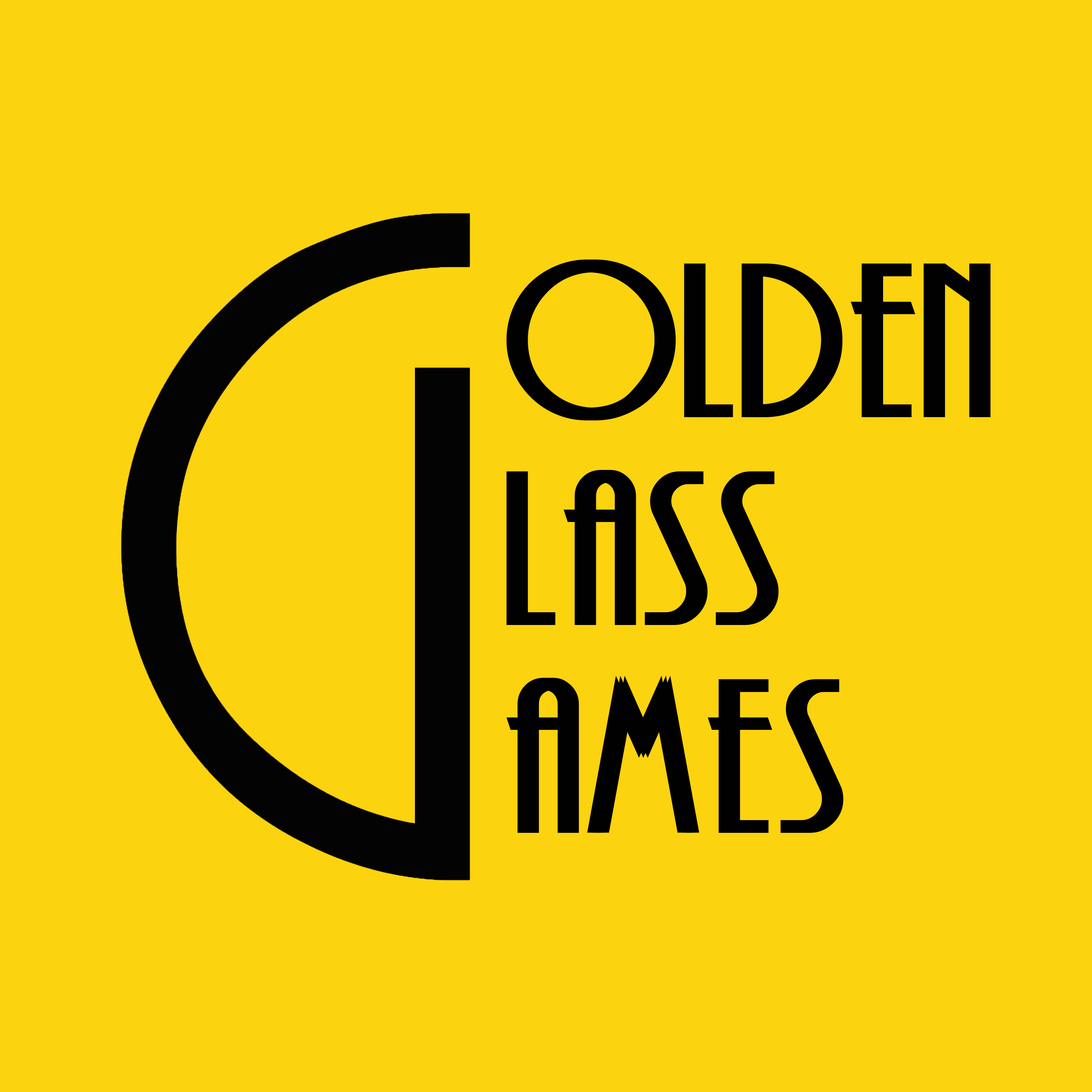
<style>
.page{position:relative;width:1092px;height:1092px;background:#fcd30f}
.page>*{position:absolute;margin:0}
.t1{font:204.7px/207.8px "Andes";letter-spacing:0.04em;color:#010101}
</style>
<div class="page">
<p class="t1" style="left:506px;top:260px;width:476px;height:573px">olden<br>lass<br>ames</p>
<p class="t1" style="left:511px;top:260px;width:475px;height:573px">olden<br>lass<br>ames</p>
<p class="t1" style="left:515px;top:260px;width:476px;height:573px">olden<br>lass<br>ames</p>
</div>
